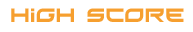
<style>
.page{position:relative;width:193px;height:32px;background:#ffffff}
.page>*{position:absolute;margin:0}
.t1{font:18px "Xirod";color:#f69f2f}
</style>
<div class="page">
<p class="t1" style="left:11px;top:8px;width:173px;height:14px">HiGh Score</p>
</div>
